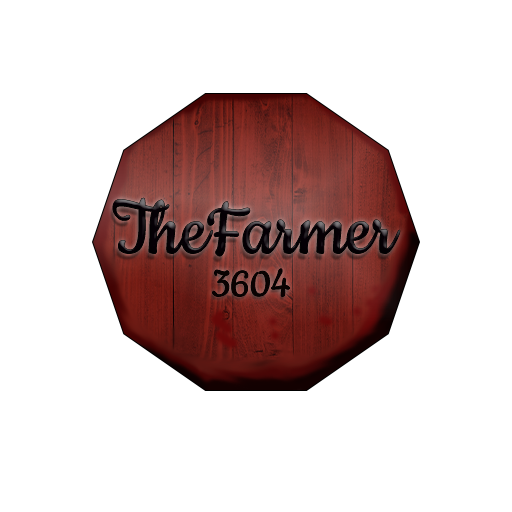
<style>
.page{position:relative;width:512px;height:512px;background:#ffffff}
.page>*{position:absolute;margin:0}
.t1{font:88.1px "Cookie-Regular";color:#060006}
.t2{font:44.9px "Cookie-Regular";color:#0b0202}
</style>
<div class="page">
<p class="t1" style="left:113px;top:198px;width:287px;height:58px">TheFarmer</p>
<p class="t2" style="left:212px;top:268px;width:78px;height:29px">3604</p>
</div>
